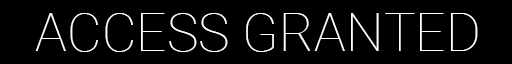
<style>
.page{position:relative;width:512px;height:64px;background:#000000}
.page>*{position:absolute;margin:0}
.t1{font:53.3px "Roboto-Thin";color:#ffffff}
</style>
<div class="page">
<p class="t1" style="left:35px;top:13px;width:443px;height:39px">ACCESS GRANTED</p>
</div>
